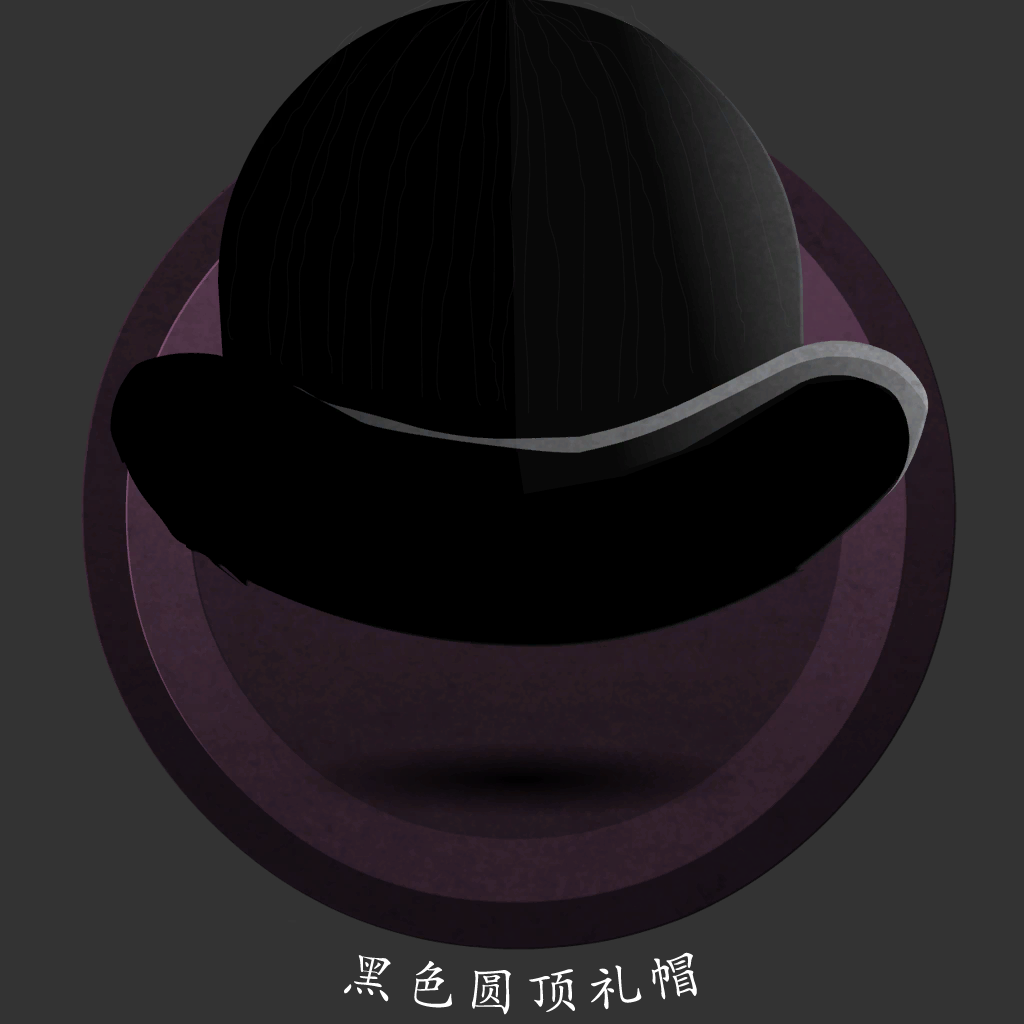
<style>
.page{position:relative;width:1024px;height:1024px;background:#333333}
.page>*{position:absolute;margin:0}
.t1{font:53.3px "STKaiti";letter-spacing:0.1em;color:#ffffff}
</style>
<div class="page">
<p class="t1" style="left:344px;top:952px;width:353px;height:63px">黑色圆顶礼帽</p>
</div>
